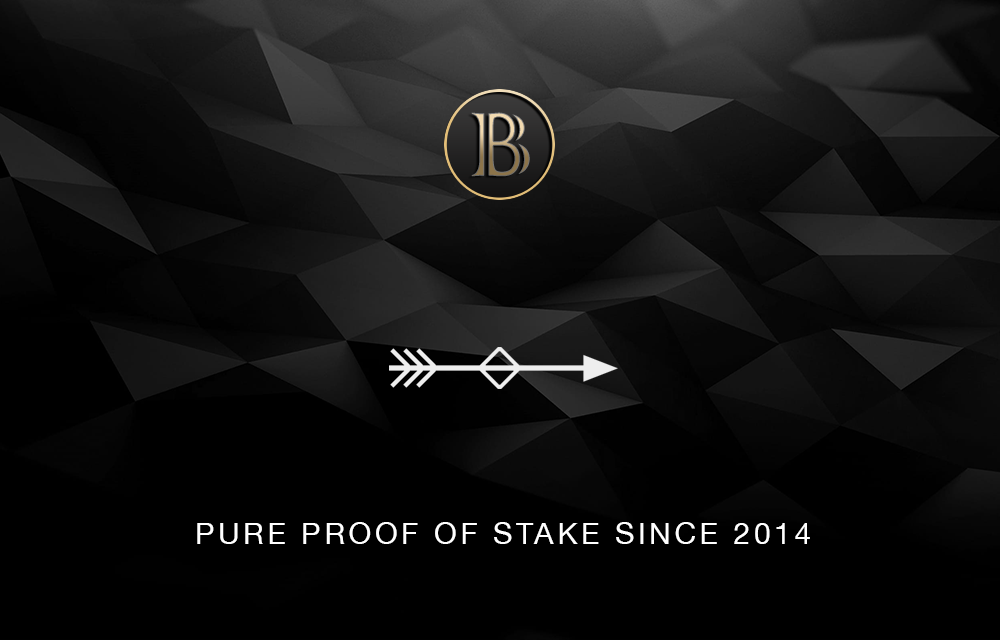
<style>
.page{position:relative;width:1000px;height:640px;background:#000000}
.page>*{position:absolute;margin:0}
.t1{font:30px "HelveticaNeue";letter-spacing:0.12em;color:#ffffff}
</style>
<div class="page">
<p class="t1" style="left:197px;top:522px;width:613px;height:22px">PURE PROOF OF STAKE SINCE 2014</p>
</div>
